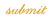
<style>
.page{position:relative;width:53px;height:20px;background:#ffffff}
.page>*{position:absolute;margin:0}
.t1{font:14px "ArchiveRoundhandScript";color:#daa520}
</style>
<div class="page">
<p class="t1" style="left:5px;top:4px;width:43px;height:11px">submit</p>
</div>
